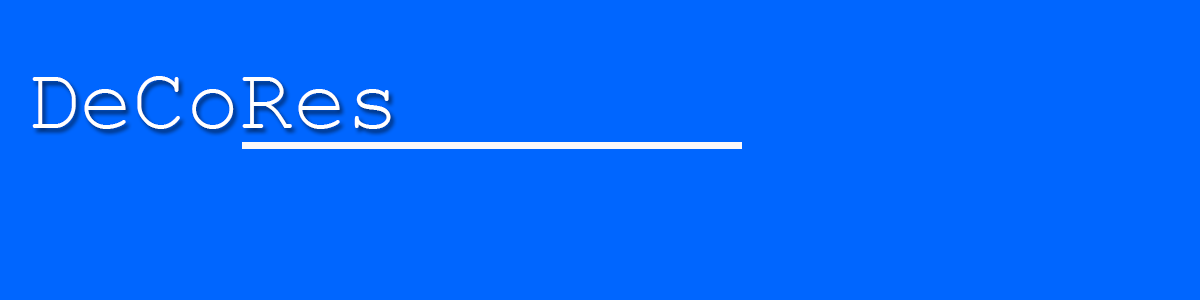
<style>
.page{position:relative;width:1200px;height:300px;background:#0066ff}
.page>*{position:absolute;margin:0}
.t1{font:89px "CourierNewPSMT";color:#ffffff}
</style>
<div class="page">
<p class="t1" style="left:32px;top:76px;width:359px;height:53px">DeCoRes</p>
</div>
